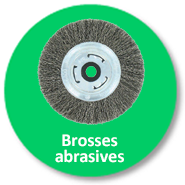
<style>
.page{position:relative;width:185px;height:185px;background:#00cc66}
.page>*{position:absolute;margin:0}
.t1{font:18px/16px "Calibri-Bold";color:#ffffff}
</style>
<div class="page">
<p class="t1" style="left:55px;top:134px;width:69px;height:29px;text-align:center">Brosses  <br>abrasives</p>
</div>
